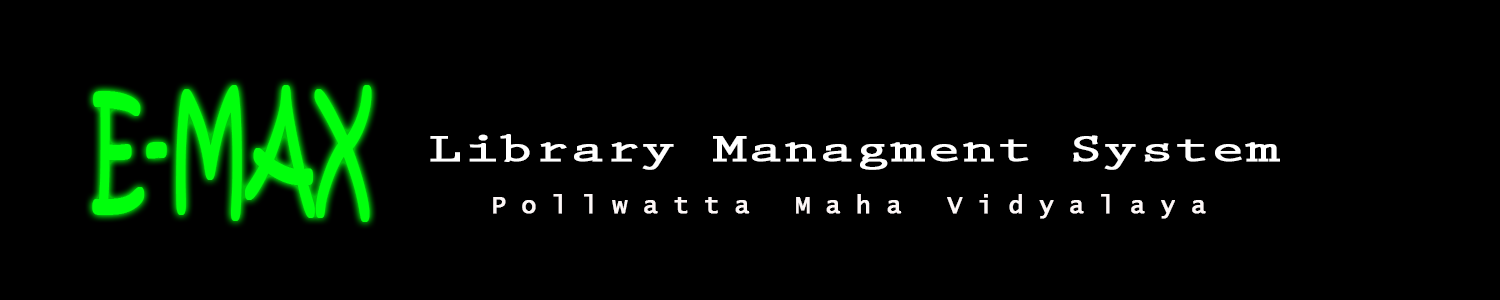
<style>
.page{position:relative;width:1500px;height:300px;background:#000000}
.page>*{position:absolute;margin:0}
.t1{font:140.7px "KristenITC-Regular";color:#00ff0c;font-weight:bold;scale:0.52 1}
.t2{font:41.4px "PrestigeEliteStd-Bd";color:#ffffff;font-weight:bold;scale:1.37 1}
.t3{font:25px "LucidaConsole";letter-spacing:0.6em;color:#fdf7f7;font-weight:bold}
</style>
<div class="page">
<p class="t1" style="left:92px;top:85px;width:280px;height:137px">E-MAX</p>
<p class="t2" style="left:430px;top:134px;width:850px;height:36px">Library Managment System</p>
<p class="t3" style="left:493px;top:194px;width:713px;height:25px">Pollwatta Maha Vidyalaya</p>
</div>
